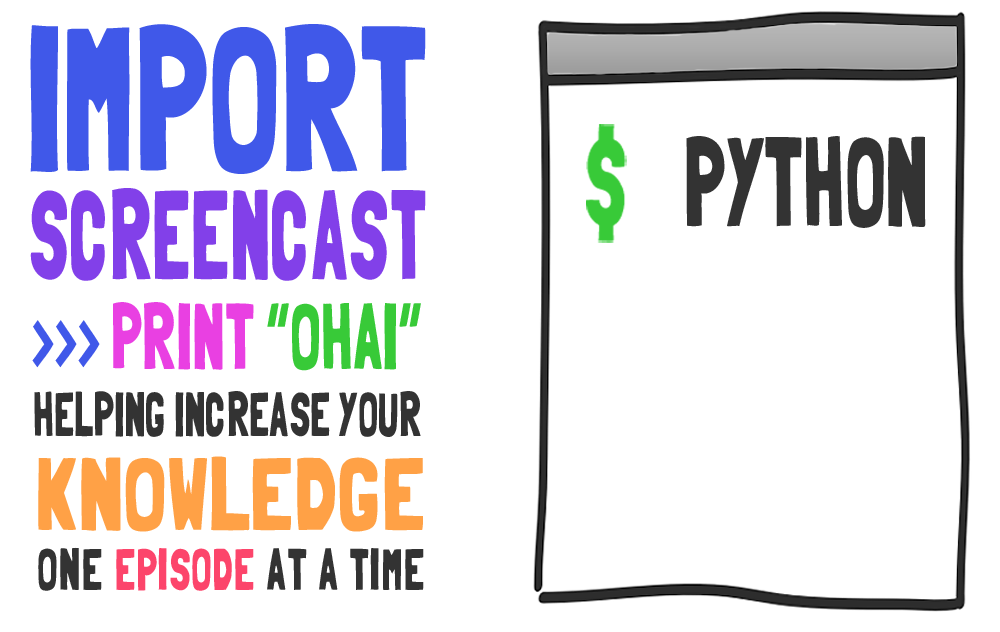
<style>
.page{position:relative;width:1000px;height:632px;background:#ffffff}
.page>*{position:absolute;margin:0}
.t1{font:205.4px "Folk-solid";color:#4058e9;scale:0.73 1}
.t2{font:126.4px "Folk-solid";color:#333333;scale:0.67 1}
.t3{font:126.4px "Folk-solid";color:#8240e9;scale:0.63 1}
.t4{font:93.2px "Folk-solid";color:#38ca38;scale:0.69 1}
.t5{font:93.2px "Folk-solid";color:#4058e9;scale:0.69 1}
.t6{font:93.2px "Folk-solid";color:#e940e2;scale:0.69 1}
.t7{font:62.4px "Folk-solid";color:#333333;scale:0.67 1}
.t8{font:102.7px "Folk-solid";color:#ffa146;scale:0.87 1}
.t9{font:84.3px "Folk-solid";color:#333333;scale:0.72 1}
.t10{font:84.3px "Folk-solid";color:#fc456b;scale:0.72 1}
</style>
<div class="page">
<p class="t1" style="left:30px;top:24px;width:396px;height:150px">IMPORT</p>
<p class="t2" style="left:686px;top:136px;width:240px;height:92px">PYTHON</p>
<p class="t3" style="left:30px;top:188px;width:396px;height:93px">SCREENCAST</p>
<p class="t4" style="left:32px;top:302px;width:389px;height:69px"><span class="t5">&gt;&gt;&gt; </span><span class="t6">PRINT </span>“OHAI”</p>
<p class="t7" style="left:34px;top:391px;width:387px;height:46px">HELPING INCREASE YOUR</p>
<p class="t8" style="left:38px;top:456px;width:385px;height:76px">KNOWLEDGE</p>
<p class="t9" style="left:38px;top:547px;width:386px;height:44px">one <span class="t10">episode</span> at a time</p>
</div>
